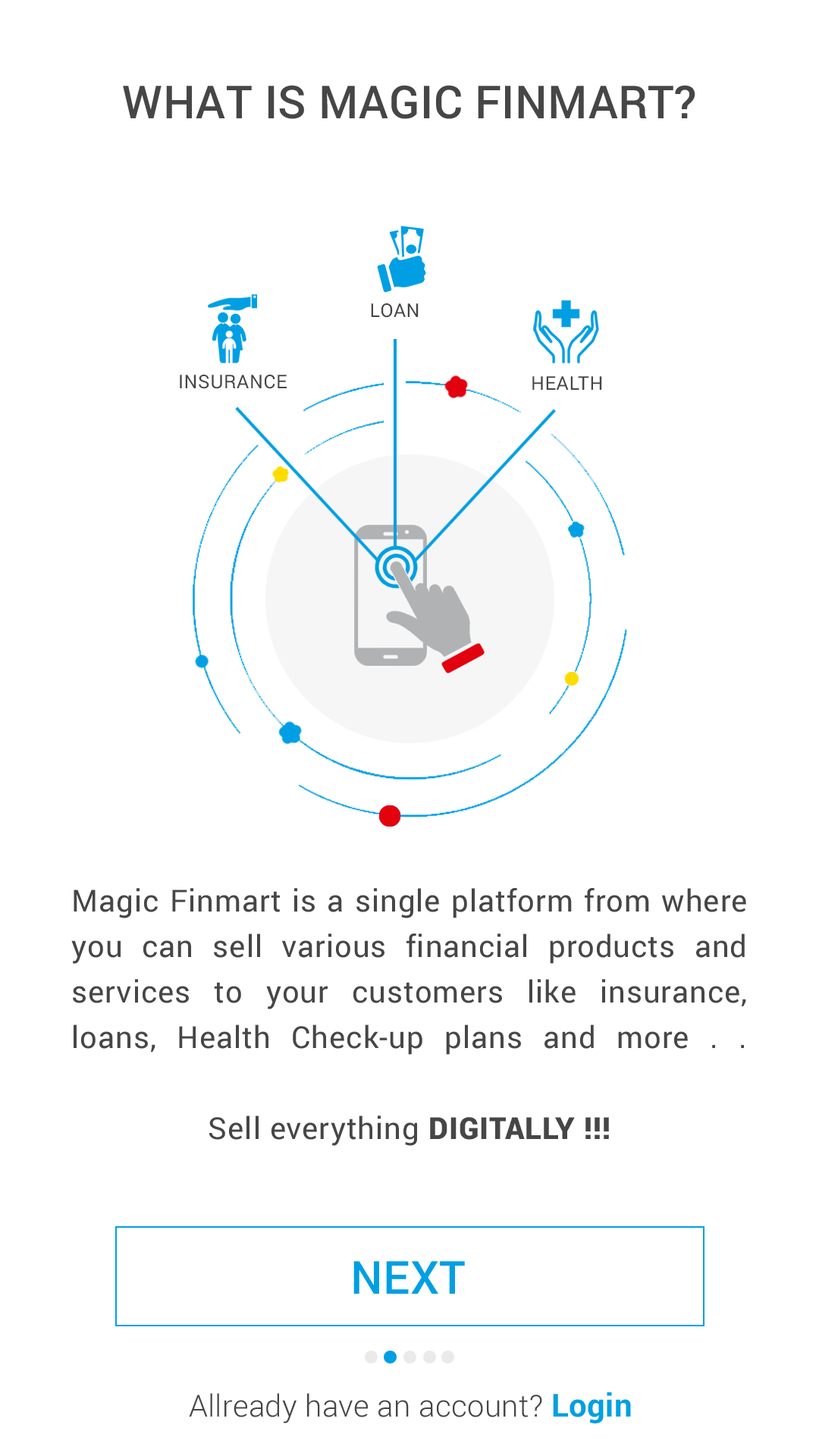
<style>
.page{position:relative;width:819px;height:1456px;background:#ffffff}
.page>*{position:absolute;margin:0}
.t1{font:45.5px "Roboto-Medium";letter-spacing:0.01em;color:#464646;text-transform:uppercase}
.t2{font:30.3px/45.5px "Roboto-Regular";letter-spacing:0.025em;color:#464646}
.t3{font:30.3px/45.5px "Roboto-Black";letter-spacing:0.025em;color:#464646}
.t4{font:45.5px "Roboto-Medium";letter-spacing:0.01em;color:#009fe3;text-transform:uppercase}
.t5{font:30.3px "Roboto-Light";letter-spacing:0.01em;color:#464646}
.t6{font:31.8px "Roboto-Bold";letter-spacing:0.01em;color:#009fe3}
</style>
<div class="page">
<p class="t1" style="left:123px;top:85px;width:572px;height:34px">WHAT IS Magic Finmart?</p>
<p class="t2" style="left:71px;top:888px;width:675px;height:258px;text-align:justify">Magic Finmart is a single platform from where you can sell various financial products and services to your customers like insurance, loans, Health Check-up plans and more . . <br><br>Sell everything <span class="t3">DIGITALLY !!!</span></p>
<p class="t4" style="left:353px;top:1261px;width:112px;height:33px">NEXT</p>
<p class="t5" style="left:189px;top:1392px;width:442px;height:31px">Allready have an account? <span class="t6">Login</span></p>
</div>
